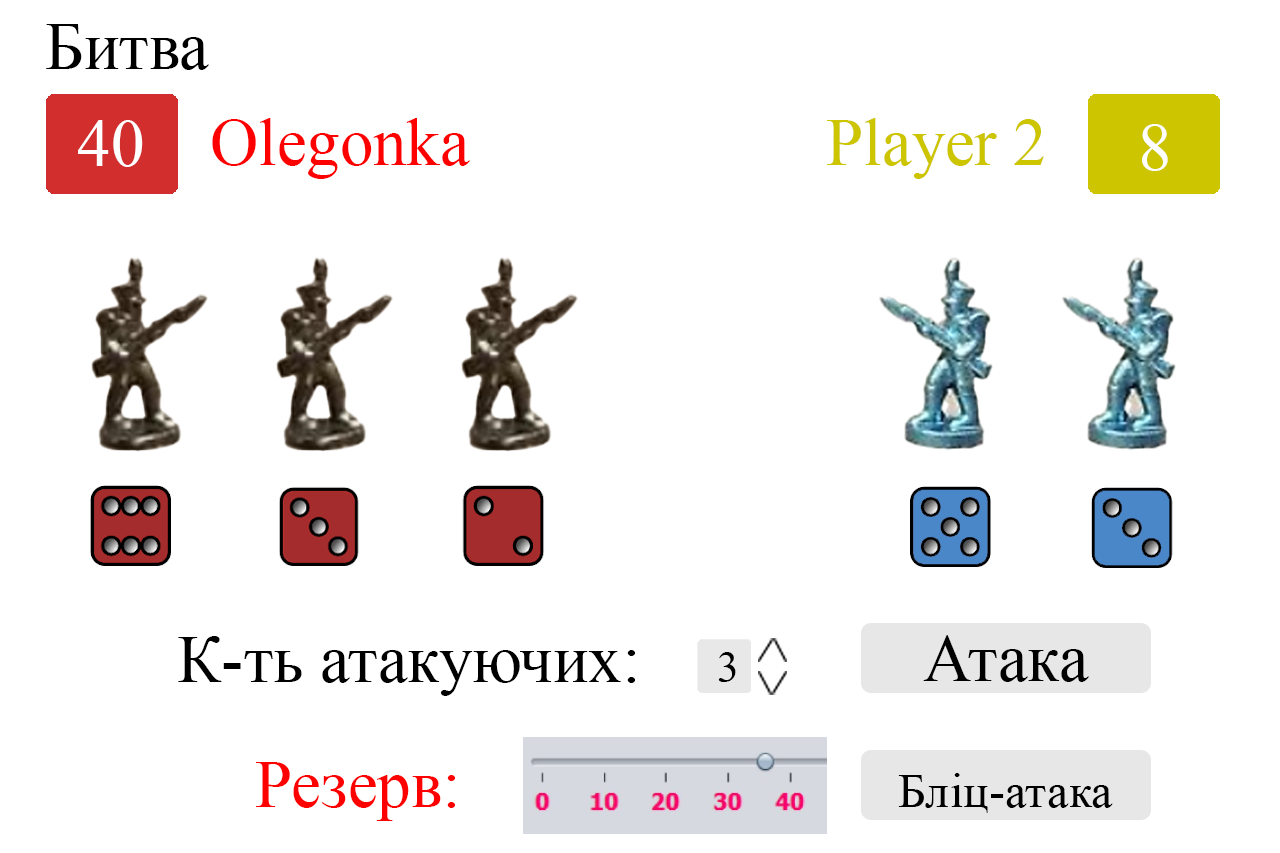
<style>
.page{position:relative;width:1280px;height:853px;background:#ffffff}
.page>*{position:absolute;margin:0}
.t1{font:66.7px "TimesNewRomanPSMT";color:#000000}
.t2{font:66.7px "TimesNewRomanPSMT";color:#ffffff}
.t3{font:66.7px "TimesNewRomanPSMT";color:#ff0000}
.t4{font:66.7px "TimesNewRomanPSMT";color:#ccc500}
.t5{font:66.7px "TimesNewRomanPSMT";color:#fefefe}
.t6{font:48.4px "TimesNewRomanPSMT";color:#000000}
</style>
<div class="page">
<p class="t1" style="left:46px;top:24px;width:163px;height:46px">Битва</p>
<p class="t2" style="left:78px;top:120px;width:65px;height:47px">40</p>
<p class="t3" style="left:212px;top:118px;width:258px;height:61px">Olegonka</p>
<p class="t4" style="left:827px;top:118px;width:217px;height:61px">Player 2</p>
<p class="t5" style="left:1142px;top:124px;width:26px;height:47px">8</p>
<p class="t1" style="left:178px;top:636px;width:457px;height:60px">К-ть атакуючих:</p>
<p class="t1" style="left:923px;top:635px;width:166px;height:47px">Атака</p>
<p class="t3" style="left:256px;top:762px;width:199px;height:59px">Резерв:</p>
<p class="t6" style="left:898px;top:773px;width:215px;height:40px">Бліц-атака</p>
</div>
